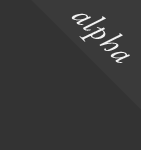
<style>
.page{position:relative;width:141px;height:150px;background:#333333}
.page>*{position:absolute;margin:0}
.t1{font:32.2px "AGaramondPro-Italic";letter-spacing:0.02em;color:#f1f1f1}
</style>
<div class="page">
<p class="t1" style="left:71px;top:13px;width:59px;height:50px;rotate:45deg">alpha</p>
</div>
